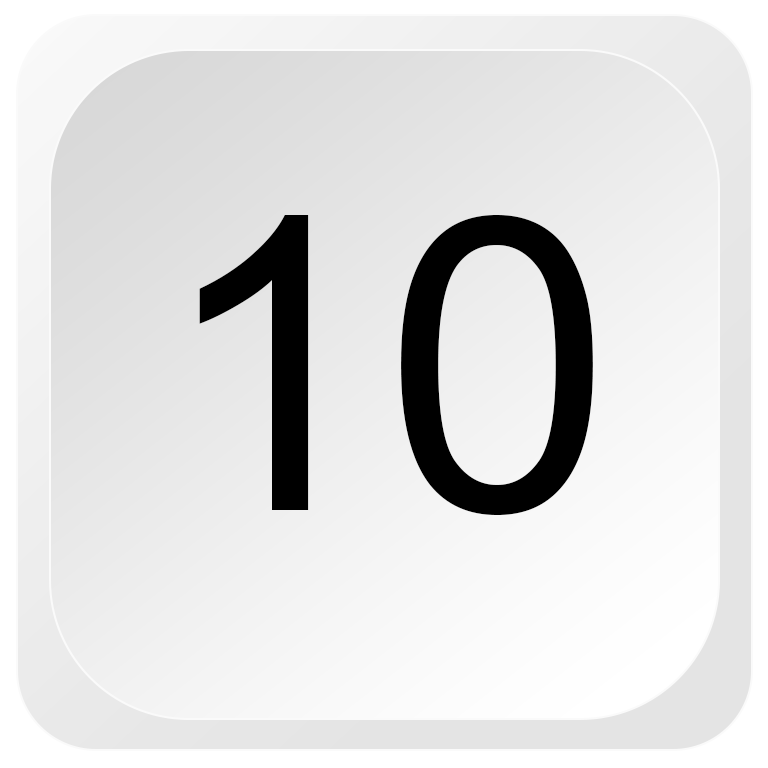
<style>
.page{position:relative;width:768px;height:768px}
.page>*{position:absolute;margin:0}
.t1{font:411px "ArialMT";color:#000000}
</style>
<div class="page">
<p class="t1" style="left:199px;top:215px;width:394px;height:300px">10</p>
</div>
